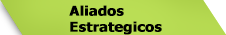
<style>
.page{position:relative;width:226px;height:35px}
.page>*{position:absolute;margin:0}
.t1{font:13.3px "Tahoma-Bold";color:#000000;font-weight:bold;scale:1.07 1}
</style>
<div class="page">
<p class="t1" style="left:69px;top:5px;width:93px;height:30px;text-align:justify">Aliados <br>Estrategicos</p>
</div>
